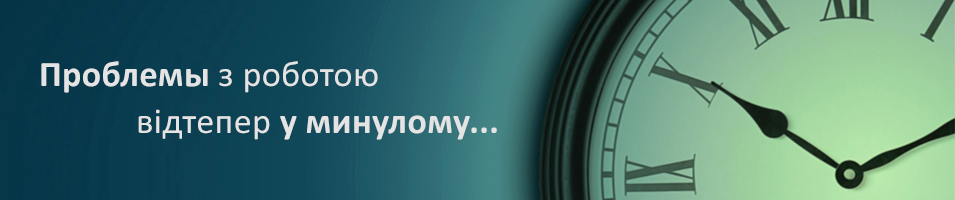
<style>
.page{position:relative;width:955px;height:200px}
.page>*{position:absolute;margin:0}
.t1{font:36px "Calibri";letter-spacing:0.01em;color:#e4e4e4}
.t2{font:36px "Calibri-Bold";letter-spacing:0.01em;color:#e4e4e4}
</style>
<div class="page">
<p class="t1" style="left:41px;top:61px;width:337px;height:32px"><span class="t2">Проблемы </span>з роботою</p>
<p class="t2" style="left:138px;top:109px;width:359px;height:31px"><span class="t1">відтепер </span>у минулому...</p>
</div>
